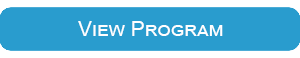
<style>
.page{position:relative;width:300px;height:58px;background:#299cce}
.page>*{position:absolute;margin:0}
.t1{font:20.8px "ArialMT";color:#ffffff;font-variant:small-caps}
</style>
<div class="page">
<p class="t1" style="left:78px;top:21px;width:145px;height:15px">View Program</p>
</div>
